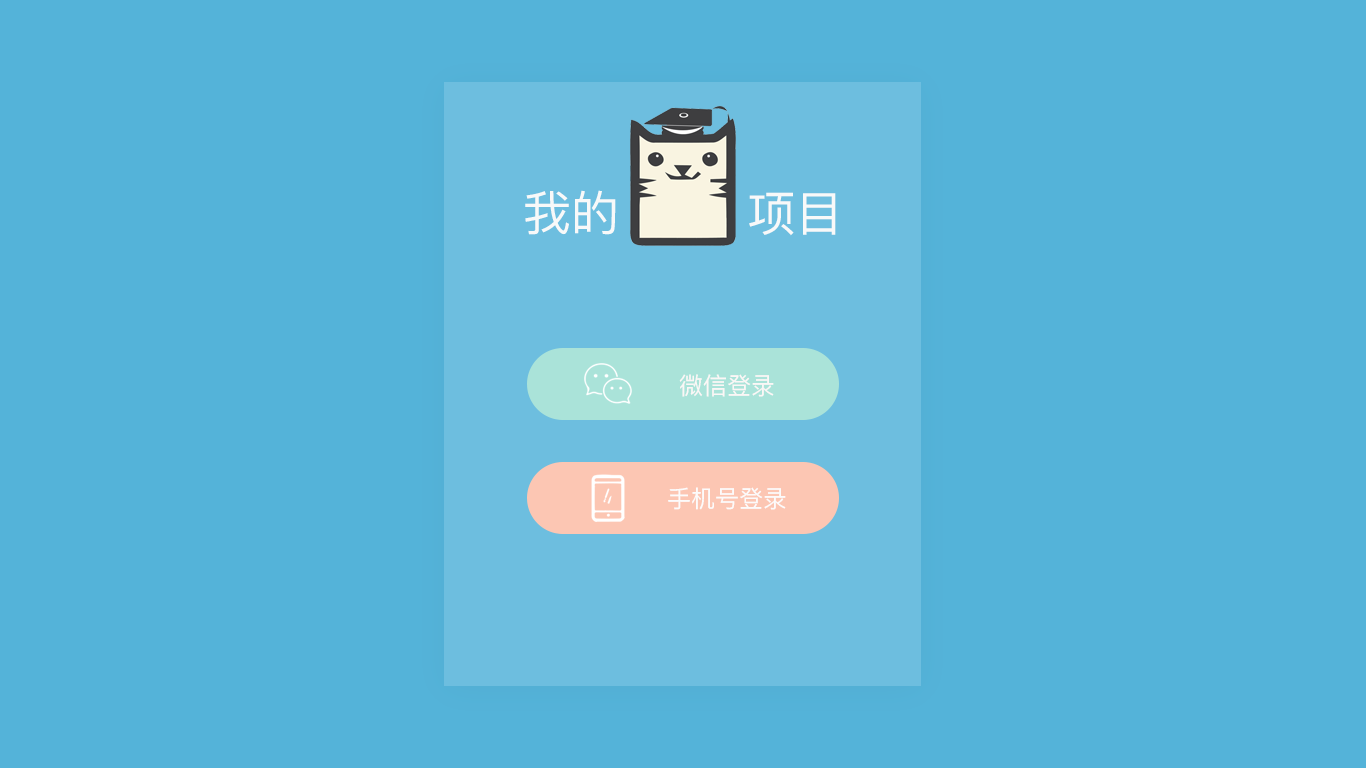
<style>
.page{position:relative;width:1366px;height:768px;background:#54b3d9}
.page>*{position:absolute;margin:0}
.t1{font:48px "PingFangSC-Regular";color:#f8f9f9}
.t2{font:24px "PingFangSC-Regular";color:#fbf7f6}
.t3{font:24px "PingFangSC-Regular";color:#fcfbfb}
</style>
<div class="page">
<p class="t1" style="left:525px;top:190px;width:311px;height:46px">我的        项目</p>
<p class="t2" style="left:679px;top:374px;width:95px;height:23px">微信登录</p>
<p class="t3" style="left:668px;top:487px;width:118px;height:23px">手机号登录</p>
</div>
